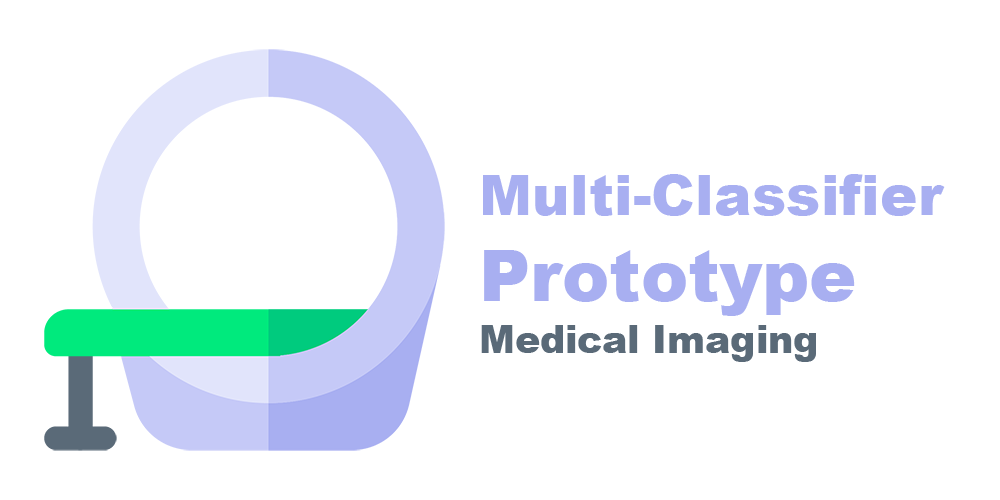
<style>
.page{position:relative;width:1000px;height:500px;background:#ffffff}
.page>*{position:absolute;margin:0}
.t1{font:56.4px "Arial-Black";color:#a8aff1}
.t2{font:70.5px "Arial-Black";color:#a8aff1}
.t3{font:37.6px "Arial-Black";color:#5a6a78}
</style>
<div class="page">
<p class="t1" style="left:483px;top:174px;width:462px;height:42px">Multi-Classifier</p>
<p class="t2" style="left:484px;top:250px;width:371px;height:66px">Prototype</p>
<p class="t3" style="left:481px;top:325px;width:335px;height:37px">Medical Imaging</p>
</div>
